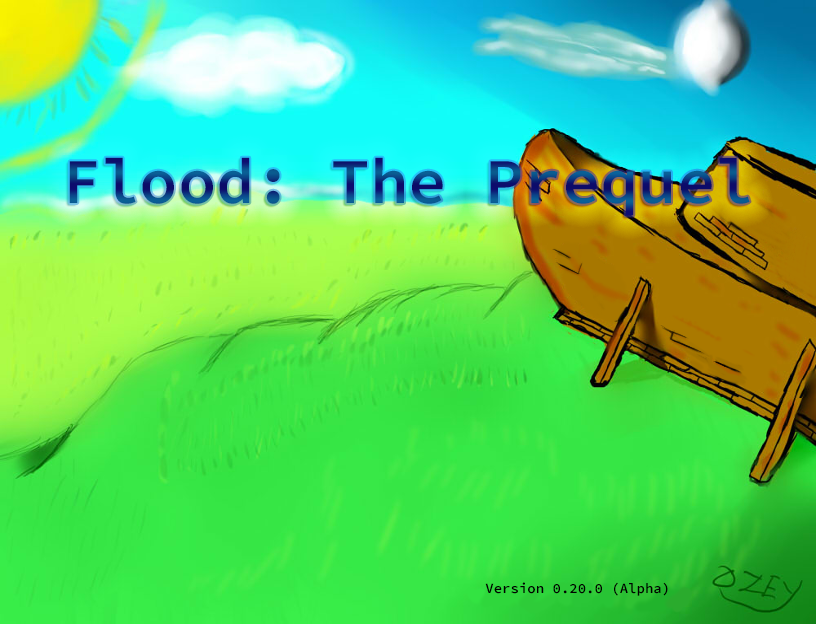
<style>
.page{position:relative;width:816px;height:624px}
.page>*{position:absolute;margin:0}
.t1{font:64px "SourceCodePro-Semibold"}
.t2{font:14px "SourceCodePro-Semibold";color:#010101}
</style>
<div class="page">
<p class="t1" style="left:69px;top:157px;width:681px;height:59px">Flood: The Prequel</p>
<p class="t2" style="left:485px;top:582px;width:183px;height:14px">Version 0.20.0 (Alpha)</p>
</div>
